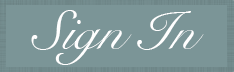
<style>
.page{position:relative;width:234px;height:72px;background:#7b9597}
.page>*{position:absolute;margin:0}
.t1{font:55px "SnellRoundhand";color:#ffffff}
</style>
<div class="page">
<p class="t1" style="left:31px;top:10px;width:173px;height:55px">Sign In</p>
</div>
